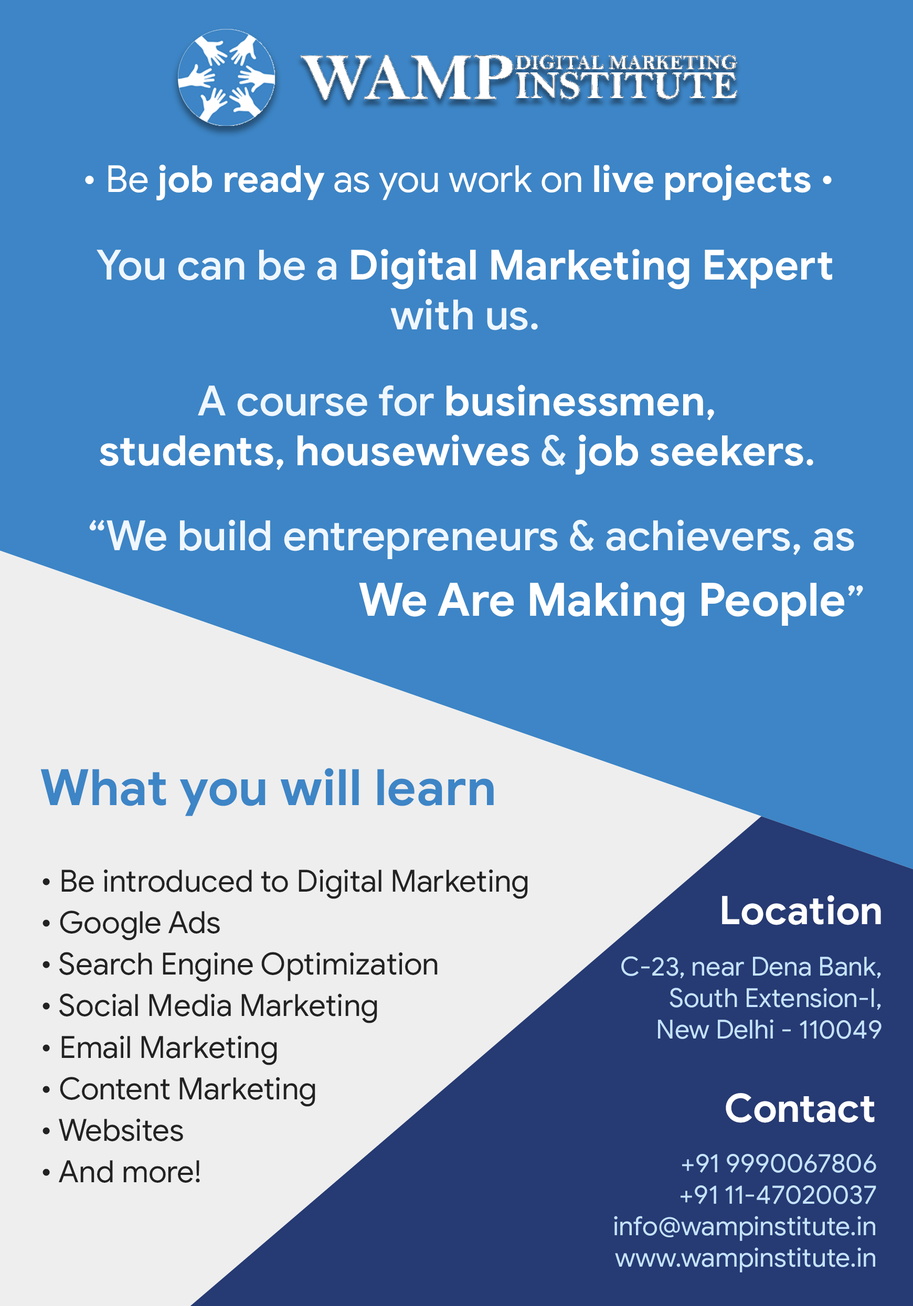
<style>
.page{position:relative;width:913px;height:1306px;background:#3d85c6}
.page>*{position:absolute;margin:0}
.t1{font:37.2px "GoogleSans-Regular";color:#ffffff}
.t2{font:37.2px "GoogleSans-Bold";color:#ffffff}
.t3{font:41.5px "GoogleSans-Bold";color:#ffffff}
.t4{font:41.5px "GoogleSans-Medium";color:#eff7ff}
.t5{font:41.5px "GoogleSans-Medium";color:#ffffff}
.t6{font:41.5px/65.6px "GoogleSans-Medium";color:#eff7ff}
.t7{font:45.9px/65.6px "GoogleSans-Bold";color:#ffffff}
.t8{font:50.3px "GoogleSans-Bold";color:#3d85c6}
.t9{font:30.6px/41.5px "GoogleSans-Regular";color:#222222}
.t10{font:39.3px "GoogleSans-Bold";color:#ffffff}
.t11{font:26.2px "GoogleSans-Regular";color:#c4e3ff}
</style>
<div class="page">
<p class="t1" style="left:85px;top:165px;width:747px;height:35px">• Be <span class="t2">job ready</span> as you work on <span class="t2">live projects</span> •</p>
<p class="t3" style="left:97px;top:249px;width:735px;height:82px;text-align:center"><span class="t4">You can be a </span>Digital Marketing Expert<br><span class="t4">with us.</span></p>
<p class="t4" style="left:100px;top:385px;width:713px;height:90px;text-align:center">A course for <span class="t3">businessmen</span><span class="t5">,<br></span><span class="t3">students</span><span class="t5">, </span><span class="t3">housewives </span>&amp; <span class="t3">job seekers</span><span class="t5">.</span></p>
<p class="t6" style="left:89px;top:520px;width:774px;height:107px;text-align:right">“We build entrepreneurs &amp; achievers, as <br><span class="t7">We Are Making People</span>”</p>
<p class="t8" style="left:40px;top:768px;width:454px;height:48px">What you will learn</p>
<p class="t9" style="left:42px;top:869px;width:486px;height:314px">• Be introduced to Digital Marketing<br>• Google Ads<br>• Search Engine Optimization<br>• Social Media Marketing<br>• Email Marketing<br>• Content Marketing<br>• Websites<br>• And more!</p>
<p class="t10" style="left:722px;top:896px;width:159px;height:29px">Location</p>
<p class="t11" style="left:621px;top:956px;width:260px;height:83px;text-align:right">C-23, near Dena Bank,<br>South Extension-I,<br>New Delhi - 110049</p>
<p class="t10" style="left:726px;top:1093px;width:149px;height:30px">Contact</p>
<p class="t11" style="left:614px;top:1154px;width:262px;height:119px;text-align:right">+91 9990067806<br>+91 11-47020037<br>info@wampinstitute.in<br>www.wampinstitute.in</p>
</div>
